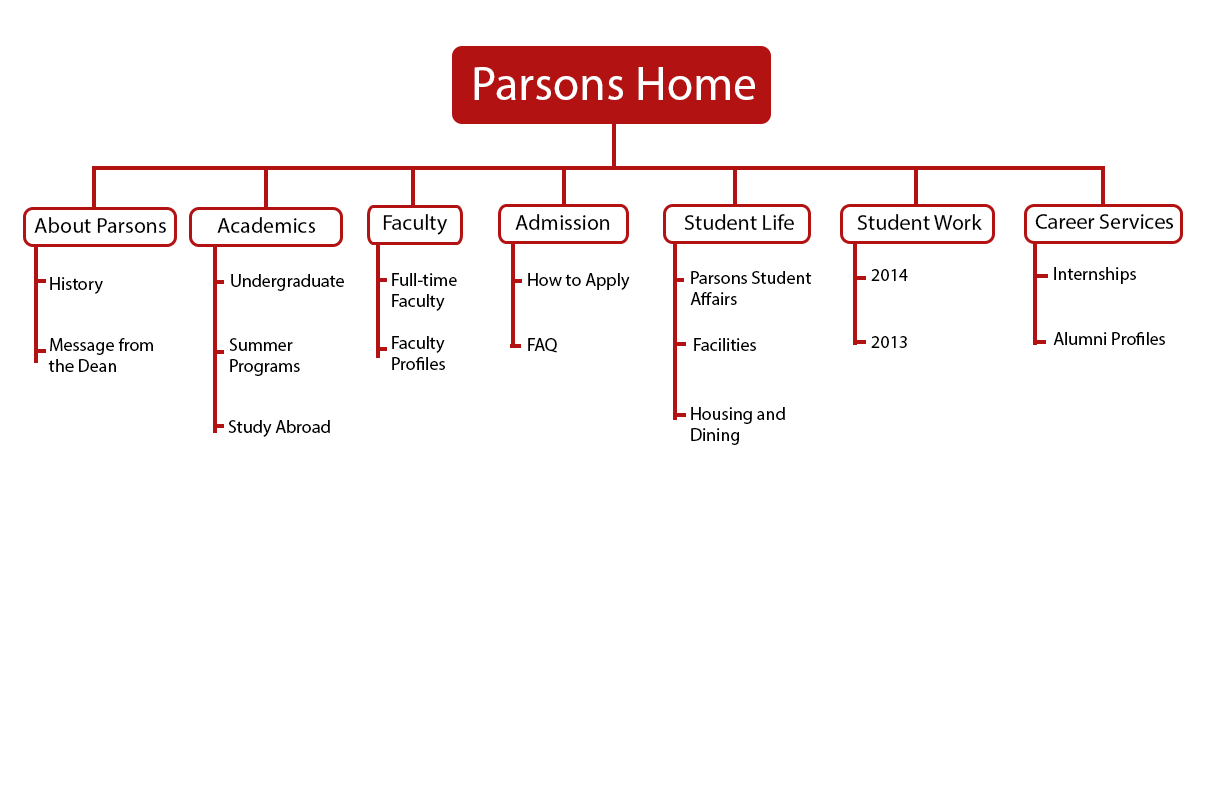
<style>
.page{position:relative;width:1224px;height:792px;background:#ffffff}
.page>*{position:absolute;margin:0}
.t1{font:48px "MyriadPro-Regular";color:#ffffff}
.t2{font:22px "MyriadPro-Regular";color:#000000}
.t3{font:18px "MyriadPro-Regular";color:#000000}
</style>
<div class="page">
<p class="t1" style="left:474px;top:67px;width:281px;height:33px">Parsons Home</p>
<p class="t2" style="left:34px;top:217px;width:132px;height:16px">About Parsons</p>
<p class="t2" style="left:217px;top:217px;width:99px;height:16px">Academics</p>
<p class="t2" style="left:383px;top:214px;width:65px;height:21px">Faculty</p>
<p class="t2" style="left:515px;top:214px;width:95px;height:16px">Admission</p>
<p class="t2" style="left:684px;top:214px;width:110px;height:16px">Student Life</p>
<p class="t2" style="left:857px;top:214px;width:125px;height:16px">Student Work</p>
<p class="t2" style="left:1035px;top:214px;width:139px;height:15px">Career Services</p>
<p class="t3" style="left:871px;top:269px;width:37px;height:12px">2014</p>
<p class="t3" style="left:1054px;top:267px;width:82px;height:17px">Internships</p>
<p class="t3" style="left:50px;top:277px;width:53px;height:17px">History</p>
<p class="t3" style="left:231px;top:274px;width:113px;height:17px">Undergraduate</p>
<p class="t3" style="left:392px;top:273px;width:65px;height:38px">Full-time <br>Faculty</p>
<p class="t3" style="left:528px;top:273px;width:102px;height:17px">How to Apply</p>
<p class="t3" style="left:690px;top:271px;width:122px;height:34px">Parsons Student Affairs</p>
<p class="t3" style="left:48px;top:338px;width:105px;height:34px">Message from the Dean</p>
<p class="t3" style="left:229px;top:338px;width:71px;height:38px">Summer <br>Programs</p>
<p class="t3" style="left:392px;top:336px;width:53px;height:34px">Faculty <br>Profiles</p>
<p class="t3" style="left:528px;top:338px;width:29px;height:15px">FAQ</p>
<p class="t3" style="left:694px;top:338px;width:62px;height:13px">Facilities</p>
<p class="t3" style="left:871px;top:336px;width:36px;height:12px">2013</p>
<p class="t3" style="left:1053px;top:332px;width:112px;height:13px">Alumni Profiles</p>
<p class="t3" style="left:691px;top:407px;width:94px;height:38px">Housing and Dining</p>
<p class="t3" style="left:228px;top:420px;width:102px;height:17px">Study Abroad</p>
</div>
